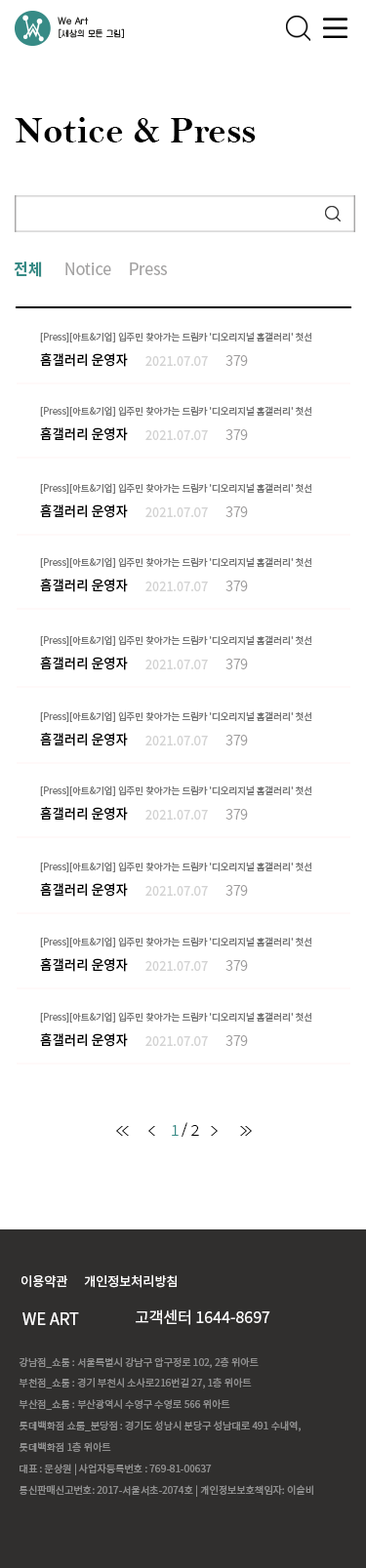
<style>
.page{position:relative;width:366px;height:1568px;background:#ffffff}
.page>*{position:absolute;margin:0}
.t1{font:37.6px "BellMTBold";color:#000000}
.t2{font:16.3px "NotoSansKR-Bold";color:#378b86;scale:0.96 1}
.t3{font:16.3px "NotoSansKR-Regular";color:#a3a2a2;scale:0.96 1}
.t4{font:9.4px "NotoSansKR-Regular";color:#767676}
.t5{font:13.7px "NotoSansKR-Medium";color:#000000;scale:0.96 1}
.t6{font:13.2px "NotoSansKR-Regular";color:#d3d3d3;scale:0.95 1}
.t7{font:14.7px "NotoSansKR-Light";color:#9d9b9b;scale:0.95 1}
.t8{font:15px "NotoSansKR-Light";color:#378b86;scale:1.09 1}
.t9{font:14.2px "NotoSansKR-Light";color:#000000}
.t10{font:15px "NotoSansKR-Light";color:#000000;scale:1.09 1}
.t11{font:12.8px "NotoSansKR-Regular";color:#fffefe}
.t12{font:16.2px "NotoSansKR-Regular";color:#fffefe}
.t13{font:15.7px "NotoSansKR-Regular";color:#fffefe}
.t14{font:10px/21.3px "NotoSansKR-Regular";color:#8e8e8e}
</style>
<div class="page">
<p class="t1" style="left:15px;top:117px;width:241px;height:25px">Notice &amp; Press</p>
<p class="t2" style="left:14px;top:261px;width:28px;height:16px">전체</p>
<p class="t3" style="left:65px;top:262px;width:46px;height:13px">Notice</p>
<p class="t3" style="left:130px;top:262px;width:37px;height:13px">Press</p>
<p class="t4" style="left:40px;top:332px;width:272px;height:10px">[Press][아트&amp;기업] 입주민 찾아가는 드림카 '디오리지널 홈갤러리' 첫선</p>
<p class="t5" style="left:40px;top:352px;width:88px;height:15px">홈갤러리 운영자</p>
<p class="t6" style="left:145px;top:356px;width:63px;height:10px">2021.07.07</p>
<p class="t7" style="left:225px;top:355px;width:23px;height:11px">379</p>
<p class="t4" style="left:40px;top:406px;width:272px;height:11px">[Press][아트&amp;기업] 입주민 찾아가는 드림카 '디오리지널 홈갤러리' 첫선</p>
<p class="t5" style="left:40px;top:426px;width:88px;height:15px">홈갤러리 운영자</p>
<p class="t6" style="left:145px;top:430px;width:63px;height:10px">2021.07.07</p>
<p class="t7" style="left:225px;top:429px;width:23px;height:11px">379</p>
<p class="t4" style="left:40px;top:483px;width:272px;height:11px">[Press][아트&amp;기업] 입주민 찾아가는 드림카 '디오리지널 홈갤러리' 첫선</p>
<p class="t5" style="left:40px;top:503px;width:88px;height:15px">홈갤러리 운영자</p>
<p class="t6" style="left:145px;top:507px;width:63px;height:10px">2021.07.07</p>
<p class="t7" style="left:225px;top:506px;width:23px;height:11px">379</p>
<p class="t4" style="left:40px;top:557px;width:272px;height:11px">[Press][아트&amp;기업] 입주민 찾아가는 드림카 '디오리지널 홈갤러리' 첫선</p>
<p class="t5" style="left:40px;top:578px;width:88px;height:14px">홈갤러리 운영자</p>
<p class="t6" style="left:145px;top:582px;width:63px;height:9px">2021.07.07</p>
<p class="t7" style="left:225px;top:581px;width:23px;height:10px">379</p>
<p class="t4" style="left:40px;top:635px;width:272px;height:11px">[Press][아트&amp;기업] 입주민 찾아가는 드림카 '디오리지널 홈갤러리' 첫선</p>
<p class="t5" style="left:40px;top:656px;width:88px;height:14px">홈갤러리 운영자</p>
<p class="t6" style="left:145px;top:660px;width:63px;height:9px">2021.07.07</p>
<p class="t7" style="left:225px;top:659px;width:23px;height:10px">379</p>
<p class="t4" style="left:40px;top:711px;width:272px;height:11px">[Press][아트&amp;기업] 입주민 찾아가는 드림카 '디오리지널 홈갤러리' 첫선</p>
<p class="t5" style="left:40px;top:732px;width:88px;height:14px">홈갤러리 운영자</p>
<p class="t6" style="left:145px;top:736px;width:63px;height:9px">2021.07.07</p>
<p class="t7" style="left:225px;top:735px;width:23px;height:10px">379</p>
<p class="t4" style="left:40px;top:785px;width:272px;height:11px">[Press][아트&amp;기업] 입주민 찾아가는 드림카 '디오리지널 홈갤러리' 첫선</p>
<p class="t5" style="left:40px;top:806px;width:88px;height:15px">홈갤러리 운영자</p>
<p class="t6" style="left:145px;top:810px;width:63px;height:10px">2021.07.07</p>
<p class="t7" style="left:225px;top:809px;width:23px;height:11px">379</p>
<p class="t4" style="left:40px;top:862px;width:272px;height:10px">[Press][아트&amp;기업] 입주민 찾아가는 드림카 '디오리지널 홈갤러리' 첫선</p>
<p class="t5" style="left:40px;top:882px;width:88px;height:15px">홈갤러리 운영자</p>
<p class="t6" style="left:145px;top:886px;width:63px;height:10px">2021.07.07</p>
<p class="t7" style="left:225px;top:885px;width:23px;height:11px">379</p>
<p class="t4" style="left:40px;top:937px;width:272px;height:10px">[Press][아트&amp;기업] 입주민 찾아가는 드림카 '디오리지널 홈갤러리' 첫선</p>
<p class="t5" style="left:40px;top:957px;width:88px;height:15px">홈갤러리 운영자</p>
<p class="t6" style="left:145px;top:961px;width:63px;height:10px">2021.07.07</p>
<p class="t7" style="left:225px;top:960px;width:23px;height:11px">379</p>
<p class="t4" style="left:40px;top:1012px;width:272px;height:11px">[Press][아트&amp;기업] 입주민 찾아가는 드림카 '디오리지널 홈갤러리' 첫선</p>
<p class="t5" style="left:40px;top:1032px;width:88px;height:15px">홈갤러리 운영자</p>
<p class="t6" style="left:145px;top:1036px;width:63px;height:10px">2021.07.07</p>
<p class="t7" style="left:225px;top:1035px;width:23px;height:11px">379</p>
<p class="t8" style="left:172px;top:1125px;width:7px;height:11px">1</p>
<p class="t9" style="left:181px;top:1122px;width:6px;height:15px">/</p>
<p class="t10" style="left:191px;top:1125px;width:8px;height:11px">2</p>
<p class="t11" style="left:21px;top:1275px;width:46px;height:13px">이용약관</p>
<p class="t11" style="left:84px;top:1274px;width:93px;height:14px">개인정보처리방침</p>
<p class="t12" style="left:22px;top:1312px;width:57px;height:13px">WE ART</p>
<p class="t13" style="left:136px;top:1309px;width:134px;height:16px">고객센터 1644-8697</p>
<p class="t14" style="left:19px;top:1357px;width:294px;height:140px">강남점_쇼룸 : 서울특별시 강남구 압구정로 102, 2층 위아트  <br>부천점_쇼룸 : 경기 부천시 소사로216번길 27, 1층 위아트<br>부산점_쇼룸 : 부산광역시 수영구 수영로 566 위아트<br>롯데백화점 쇼룸_분당점 : 경기도 성남시 분당구 성남대로 491 수내역, <br>롯데백화점 1층 위아트<br>대표 : 문상원 | 사업자등록번호 : 769-81-00637 <br>통신판매신고번호: 2017-서울서초-2074호 | 개인정보보호책임자: 이슬비</p>
</div>
